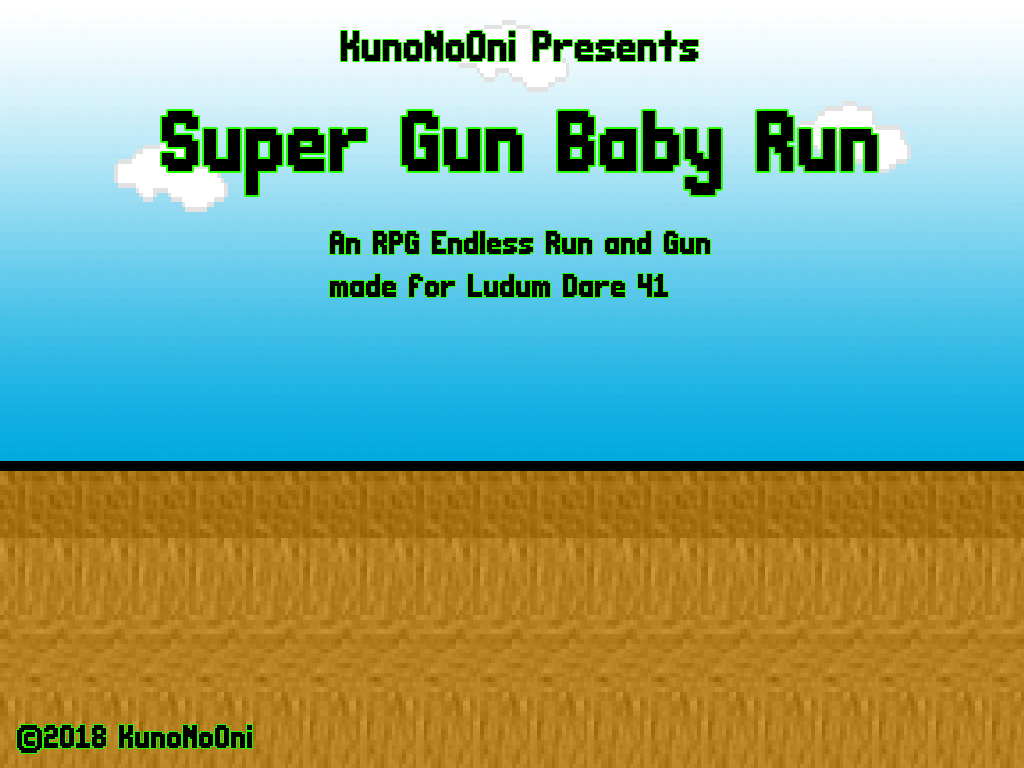
<style>
.page{position:relative;width:1024px;height:768px}
.page>*{position:absolute;margin:0}
.t1{font:24px "CasualEncounter";color:#000000}
.t2{font:48px "CasualEncounter";color:#000000}
.t3{font:18px "CasualEncounter";color:#000000}
</style>
<div class="page">
<p class="t1" style="left:341px;top:31px;width:357px;height:30px">KunoNoOni Presents</p>
<p class="t2" style="left:162px;top:111px;width:715px;height:84px">Super Gun Baby Run</p>
<p class="t3" style="left:330px;top:231px;width:380px;height:66px">An RPG Endless Run and Gun<br><br>made for Ludum Dare 41</p>
<p class="t3" style="left:17px;top:725px;width:235px;height:28px">©2018 KunoNoOni</p>
</div>
